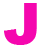
<style>
.page{position:relative;width:48px;height:48px;background:#ffffff}
.page>*{position:absolute;margin:0}
.t1{font:57px "Arial-Black";color:#f507ae}
</style>
<div class="page">
<p class="t1" style="left:4px;top:3px;width:33px;height:42px">J</p>
</div>
